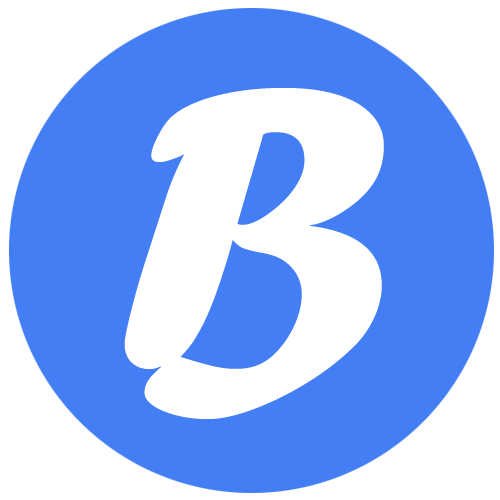
<style>
.page{position:relative;width:500px;height:500px;background:#447ef4}
.page>*{position:absolute;margin:0}
.t1{font:416.7px "ForteMT";letter-spacing:0.1em;color:#ffffff}
</style>
<div class="page">
<p class="t1" style="left:124px;top:87px;width:260px;height:332px">B</p>
</div>
